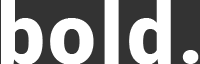
<style>
.page{position:relative;width:200px;height:64px;background:#333333}
.page>*{position:absolute;margin:0}
.t1{font:85.3px "Roboto-Black";letter-spacing:0.04em;color:#ffffff}
</style>
<div class="page">
<p class="t1" style="left:1px;top:0px;width:198px;height:65px">bold.</p>
</div>
